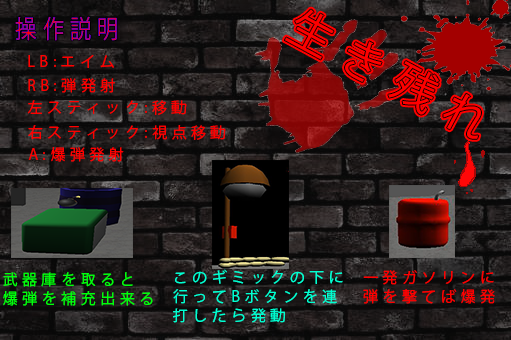
<style>
.page{position:relative;width:511px;height:340px}
.page>*{position:absolute;margin:0}
.t1{font:25px "KozGoPr6N-Regular";letter-spacing:0.3em;scale:0.84 1}
.t2{font:44.9px "KozGoPr6N-Regular";letter-spacing:0.3em;color:#ff0000}
.t3{font:15px "KozGoPr6N-Regular";letter-spacing:0.3em;color:#ff0000}
.t4{font:15px/19px "KozGoPr6N-Regular";letter-spacing:0.3em;color:#00ffd2}
.t5{font:15px/19px "KozGoPr6N-Regular";letter-spacing:0.3em;color:#ff0000}
.t6{font:15px/19px "KozGoPr6N-Regular";letter-spacing:0.3em;color:#00ff0c}
</style>
<div class="page">
<p class="t1" style="left:15px;top:16px;width:102px;height:25px">操作説明</p>
<p class="t2" style="left:284px;top:9px;width:197px;height:130px;rotate:28deg">生き残れ</p>
<p class="t3" style="left:28px;top:55px;width:86px;height:13px">LB:エイム</p>
<p class="t3" style="left:28px;top:78px;width:87px;height:15px">RB:弾発射</p>
<p class="t3" style="left:27px;top:100px;width:160px;height:15px">左スティック:移動</p>
<p class="t3" style="left:28px;top:125px;width:198px;height:15px">右スティック:視点移動</p>
<p class="t3" style="left:28px;top:147px;width:96px;height:15px">A:爆弾発射</p>
<p class="t4" style="left:173px;top:269px;width:170px;height:54px">このギミックの下に<br>行ってBボタンを連<br>打したら発動</p>
<p class="t5" style="left:363px;top:270px;width:132px;height:34px">一発ガソリンに<br>弾を撃てば爆発</p>
<p class="t6" style="left:3px;top:272px;width:150px;height:34px">武器庫を取ると<br>爆弾を補充出来る</p>
</div>
